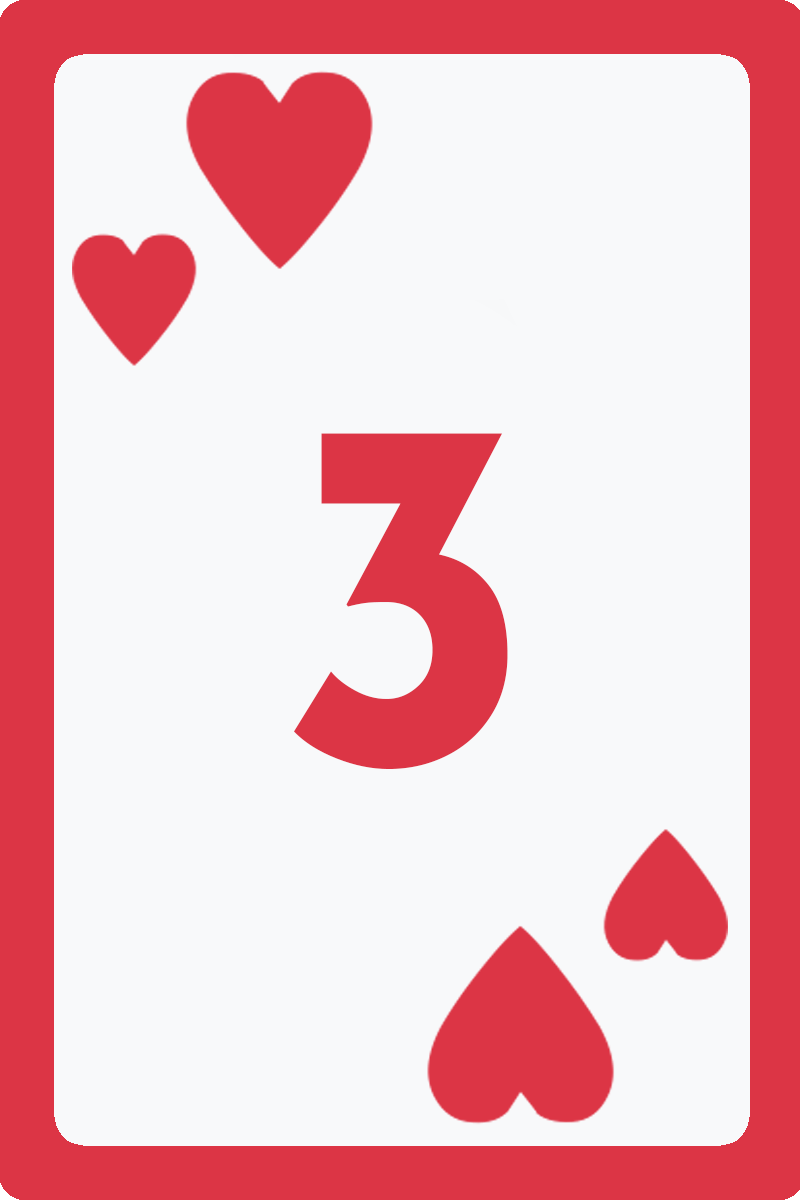
<style>
.page{position:relative;width:800px;height:1200px;background:#f8f9fa}
.page>*{position:absolute;margin:0}
.t1{font:500px "JosefinSans-Bold";color:#dc3545}
</style>
<div class="page">
<p class="t1" style="left:294px;top:433px;width:214px;height:336px">3</p>
</div>
